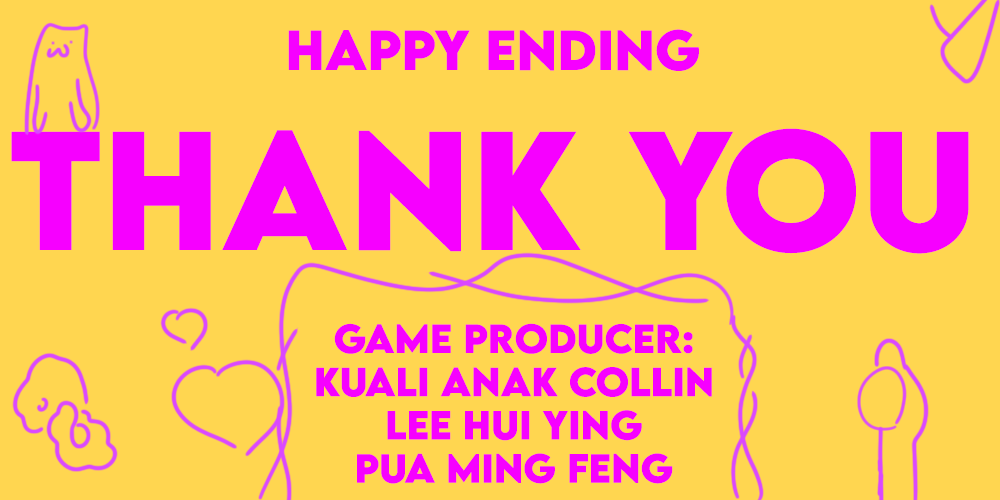
<style>
.page{position:relative;width:1000px;height:500px;background:#ffd650}
.page>*{position:absolute;margin:0}
.t1{font:50px "LEMONMILK-Bold";color:#f600ff}
.t2{font:150px "LEMONMILK-Bold";color:#f600ff}
.t3{font:36px "LEMONMILK-Bold";color:#f600ff}
</style>
<div class="page">
<p class="t1" style="left:11px;top:29px;width:958px;height:225px;text-align:center">HAPPY ENDING<br><span class="t2">THANK YOU</span></p>
<p class="t3" style="left:316px;top:323px;width:396px;height:161px;text-align:center">GAME PRODUCER:<br>kUALI aNAK cOLLIN<br>lEE hui ying<br>pua ming feng</p>
</div>
